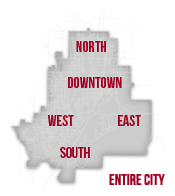
<style>
.page{position:relative;width:175px;height:196px;background:#ffffff}
.page>*{position:absolute;margin:0}
.t1{font:15.4px "BebasNeue";color:#a00022}
</style>
<div class="page">
<p class="t1" style="left:76px;top:41px;width:30px;height:11px">NORTH</p>
<p class="t1" style="left:68px;top:77px;width:54px;height:11px">DOWNTOWN</p>
<p class="t1" style="left:48px;top:115px;width:26px;height:11px">WEST</p>
<p class="t1" style="left:118px;top:115px;width:23px;height:11px">EAST</p>
<p class="t1" style="left:60px;top:147px;width:30px;height:11px">SOUTH</p>
<p class="t1" style="left:109px;top:173px;width:56px;height:13px">entire city</p>
</div>
